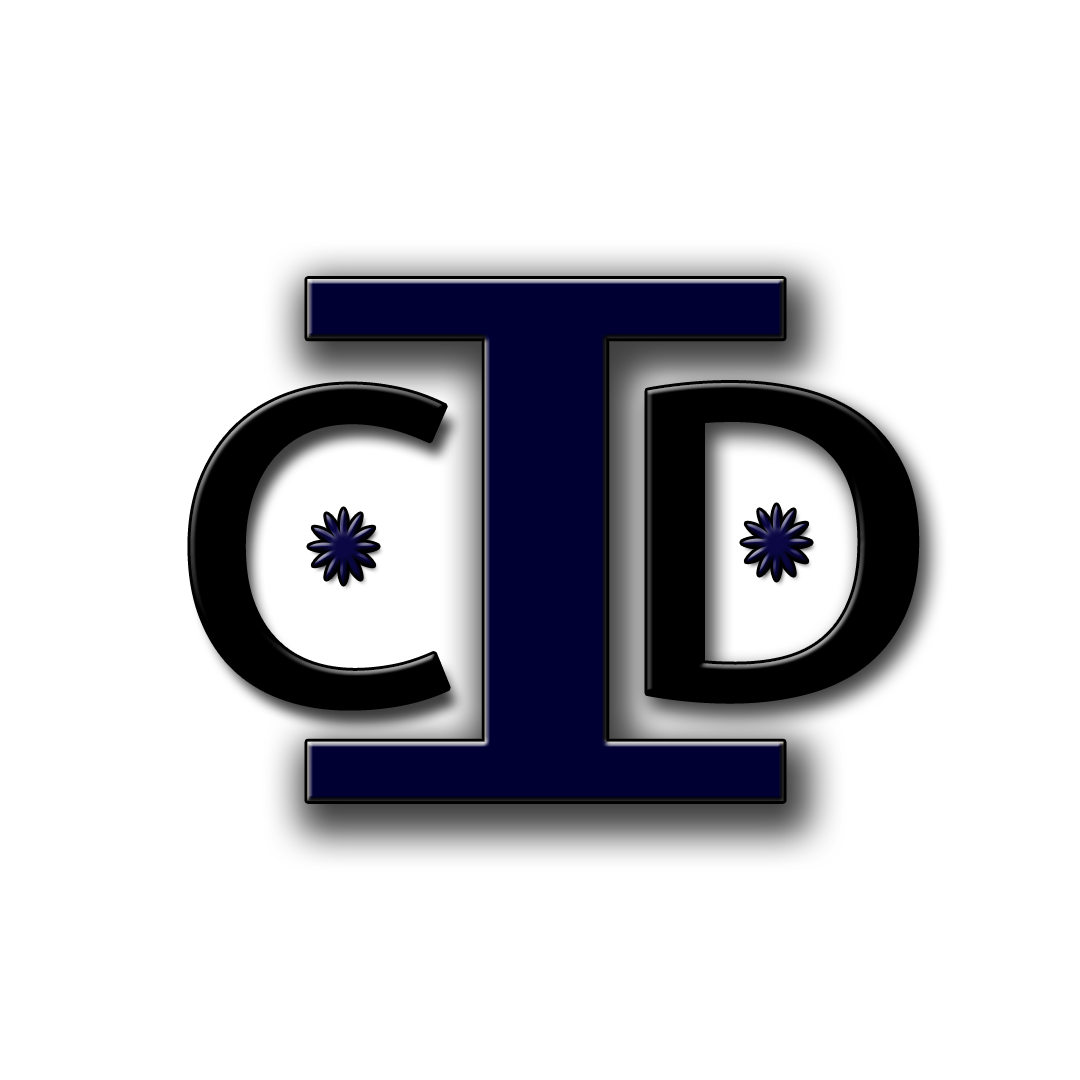
<style>
.page{position:relative;width:1080px;height:1080px;background:#ffffff}
.page>*{position:absolute;margin:0}
.t1{font:843.1px "UbuntuMono-Regular";letter-spacing:-0.025em;color:#000033;scale:1.75 1}
.t2{font:499.8px "UbuntuMono-Regular";letter-spacing:-0.025em;color:#000000;scale:1.24 1}
.t3{font:503.7px "UbuntuMono-Regular";letter-spacing:-0.025em;color:#000000;scale:1.31 1}
</style>
<div class="page">
<p class="t1" style="left:307px;top:279px;width:477px;height:522px">I</p>
<p class="t2" style="left:190px;top:384px;width:258px;height:324px">C</p>
<p class="t3" style="left:647px;top:383px;width:270px;height:318px">D</p>
</div>
